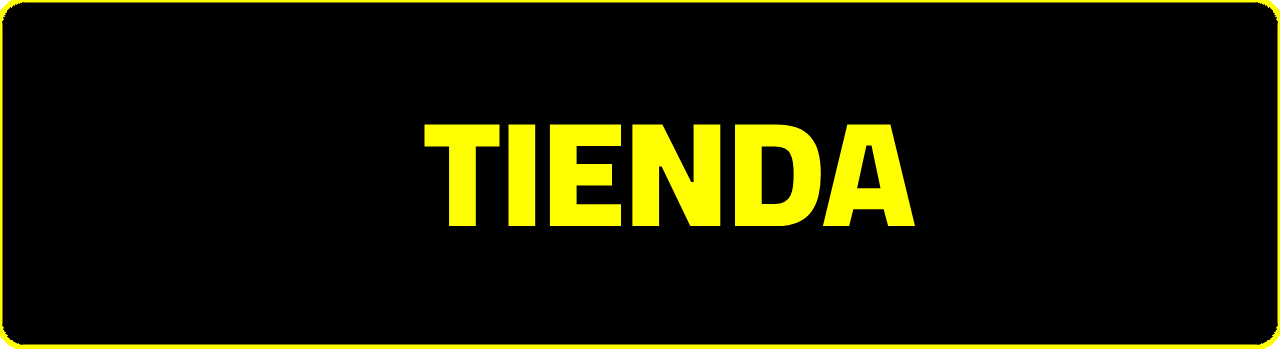
<style>
.page{position:relative;width:1280px;height:349px;background:#000000}
.page>*{position:absolute;margin:0}
.t1{font:150px "Cairo-Black";color:#ffff00}
</style>
<div class="page">
<p class="t1" style="left:424px;top:124px;width:492px;height:102px">TIENDA</p>
</div>
